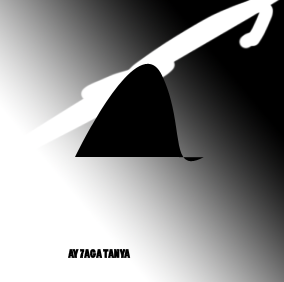
<style>
.page{position:relative;width:284px;height:282px;background:#ffffff}
.page>*{position:absolute;margin:0}
.t1{font:12px "PoplarStd";color:#000000}
</style>
<div class="page">
<p class="t1" style="left:68px;top:249px;width:63px;height:9px">AY 7AGA TANYA</p>
</div>
